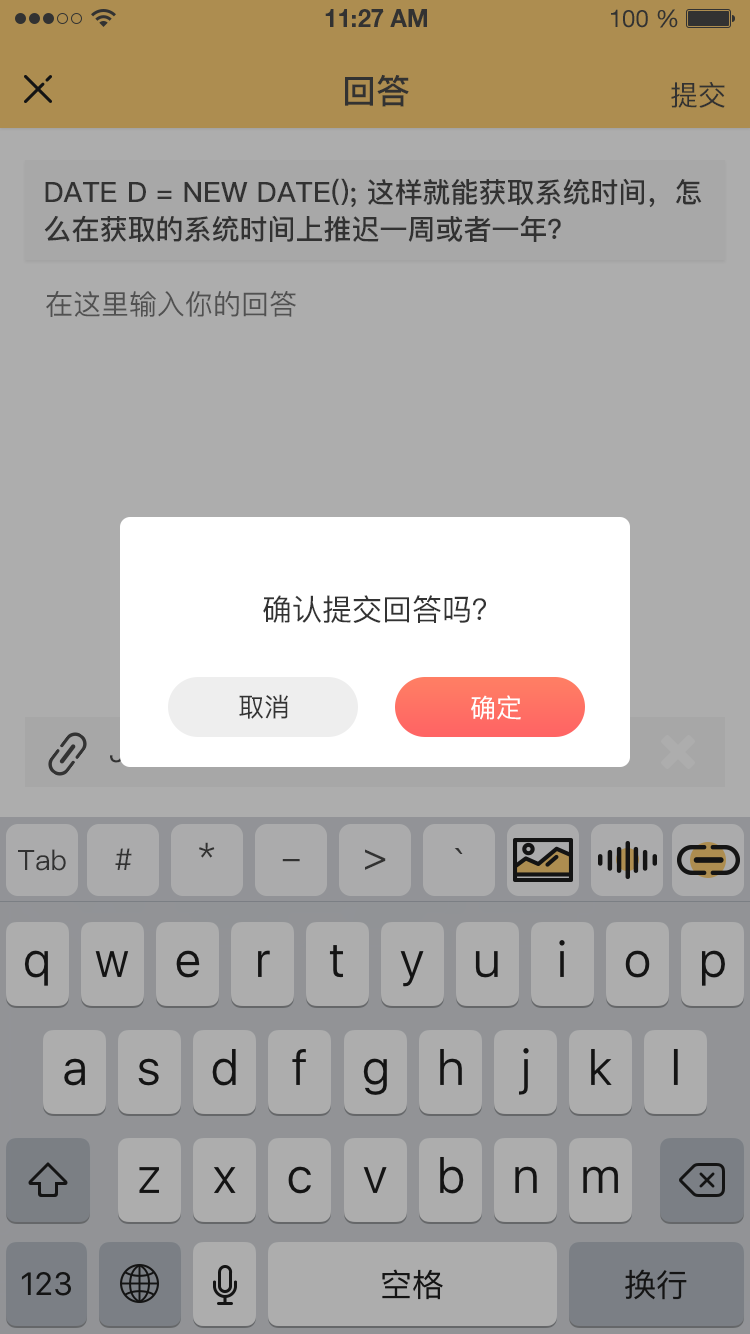
<style>
.page{position:relative;width:750px;height:1334px;background:#adadad}
.page>*{position:absolute;margin:0}
.t1{font:34px "PingFang-SC-Bold";color:#333333;text-transform:uppercase}
.t2{font:28px "PingFang-SC-Medium";color:#333333;text-transform:uppercase}
.t3{font:28px/37px "PingFang-SC-Bold";color:#333333;text-transform:uppercase}
.t4{font:28px "PingFang-SC-Medium";color:#666666;text-transform:uppercase}
.t5{font:30px "PingFang-SC-Medium";color:#333333;text-transform:uppercase}
.t6{font:26px "PingFang-SC-Medium";color:#333333;text-transform:uppercase}
.t7{font:26px "PingFang-SC-Medium";color:#fffefe;text-transform:uppercase}
.t8{font:34px "PingFang-SC-Medium";color:#333333}
.t9{font:28px "PingFang-SC-Medium";color:#333333}
.t10{font:30px "PingFang-SC-Medium";color:#333333}
.t11{font:40px "PingFang-SC-Medium";color:#333333}
</style>
<div class="page">
<p class="t1" style="left:345px;top:74px;width:64px;height:33px">回答</p>
<p class="t2" style="left:671px;top:82px;width:54px;height:26px">提交</p>
<p class="t3" style="left:44px;top:178px;width:658px;height:64px">Date d = new Date(); 这样就能获取系统时间，怎<br>么在获取的系统时间上推迟一周或者一年？</p>
<p class="t4" style="left:46px;top:290px;width:250px;height:27px">在这里输入你的回答</p>
<p class="t5" style="left:263px;top:595px;width:223px;height:28px">确认提交回答吗？</p>
<p class="t6" style="left:239px;top:694px;width:49px;height:25px">取消</p>
<p class="t7" style="left:471px;top:695px;width:50px;height:25px">确定</p>
<p class="t8" style="left:199px;top:842px;width:16px;height:16px">*</p>
<p class="t9" style="left:18px;top:849px;width:48px;height:22px"><span class="t2">T</span>ab</p>
<p class="t10" style="left:115px;top:848px;width:17px;height:22px">#</p>
<p class="t11" style="left:365px;top:849px;width:21px;height:21px">&gt;</p>
<p class="t11" style="left:454px;top:848px;width:9px;height:6px">`</p>
<p class="t8" style="left:282px;top:859px;width:18px;height:3px">-</p>
</div>
